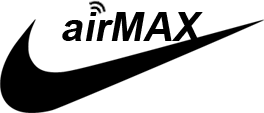
<style>
.page{position:relative;width:264px;height:113px;background:#ffffff}
.page>*{position:absolute;margin:0}
.t1{font:40px "Arial-BoldMT";color:#000000;font-style:italic}
</style>
<div class="page">
<p class="t1" style="left:62px;top:12px;width:141px;height:29px">airMAX</p>
</div>
